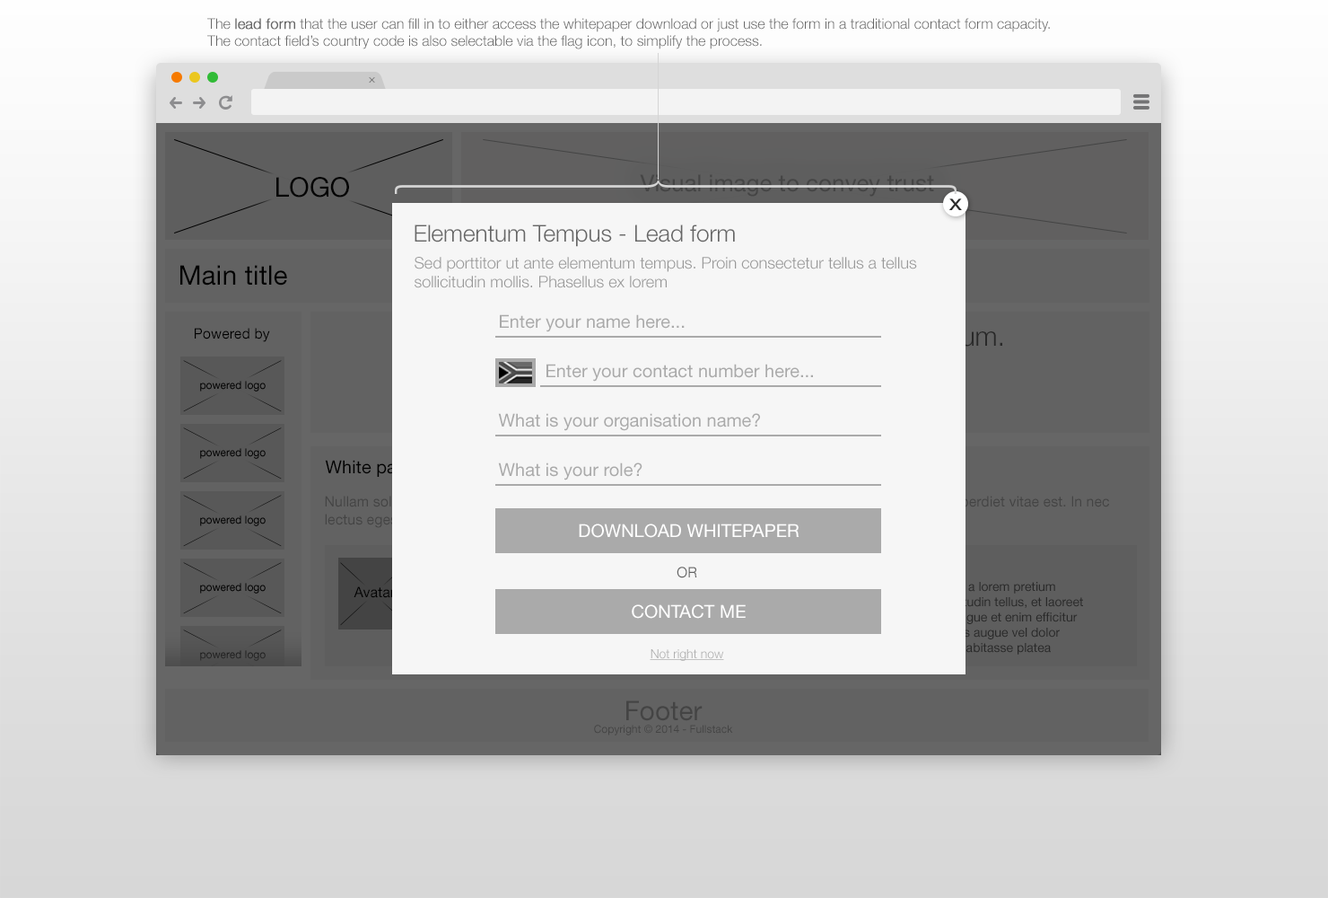
<style>
.page{position:relative;width:1328px;height:898px}
.page>*{position:absolute;margin:0}
.t1{font:14.4px "HelveticaNeueLTStd-Lt";color:#666666}
.t2{font:14.4px "HelveticaNeueLTStd-Lt";color:#666666;font-weight:bold}
.t3{font:20.8px "MavenProLight200-Regular"}
.t4{font:26.9px "HelveticaNeueLTStd-Roman";color:#000000}
.t5{font:16.2px "HelveticaNeueLTStd-Md";color:#2a2a2a;scale:1.2 1}
.t6{font:23.3px "HelveticaNeueLTStd-Lt";color:#666666}
.t7{font:16.2px "HelveticaNeueLTStd-Lt";color:#999999}
.t8{font:18px "HelveticaNeueLTStd-Roman";color:#aaaaaa}
.t9{font:14.4px "HelveticaNeueLTStd-Roman";color:#000000}
.t10{font:18px "HelveticaNeueLTStd-Roman";color:#ffffff}
.t11{font:14.4px "HelveticaNeueLTStd-Roman";color:#626262}
.t12{font:12.6px "HelveticaNeueLTStd-Lt";color:#afafaf;text-decoration:underline}
.t13{font:10.8px "HelveticaNeueLTStd-Roman";color:#444444}
.t14{font:26.9px "HelveticaNeueLTStd-Roman";color:#444444}
</style>
<div class="page">
<p class="t1" style="left:207px;top:18px;width:843px;height:31px">The <span class="t2">lead form</span> that the user can fill in to either access the whitepaper download or just use the form in a traditional contact form capacity.<br>The contact field’s country code is also selectable via the flag icon, to simplify the process.</p>
<p class="t3" style="left:369px;top:77px;width:6px;height:6px;rotate:-45deg">+</p>
<p class="t4" style="left:276px;top:177px;width:73px;height:20px">LOGO</p>
<p class="t5" style="left:949px;top:198px;width:13px;height:12px">X</p>
<p class="t6" style="left:415px;top:224px;width:320px;height:23px">Elementum Tempus - Lead form</p>
<p class="t7" style="left:415px;top:257px;width:502px;height:31px">Sed porttitor ut ante elementum tempus. Proin consectetur tellus a tellus<br>sollicitudin mollis. Phasellus ex lorem</p>
<p class="t4" style="left:180px;top:265px;width:107px;height:20px">Main title</p>
<p class="t8" style="left:500px;top:314px;width:185px;height:18px">Enter your name here...</p>
<p class="t9" style="left:195px;top:328px;width:75px;height:14px">Powered by</p>
<p class="t8" style="left:547px;top:364px;width:266px;height:17px">Enter your contact number here...</p>
<p class="t8" style="left:498px;top:413px;width:262px;height:18px">What is your organisation name?</p>
<p class="t8" style="left:498px;top:462px;width:145px;height:18px">What is your role?</p>
<p class="t10" style="left:579px;top:523px;width:221px;height:15px">DOWNLOAD WHITEPAPER</p>
<p class="t11" style="left:677px;top:566px;width:20px;height:12px">OR</p>
<p class="t9" style="left:354px;top:586px;width:41px;height:12px">Avatar</p>
<p class="t10" style="left:632px;top:604px;width:114px;height:14px">CONTACT ME</p>
<p class="t12" style="left:650px;top:649px;width:74px;height:12px">Not right now</p>
<p class="t13" style="left:594px;top:700px;width:139px;height:35px;text-align:center"><span class="t14">Footer<br></span>Copyright © 2014 - Fullstack</p>
</div>
